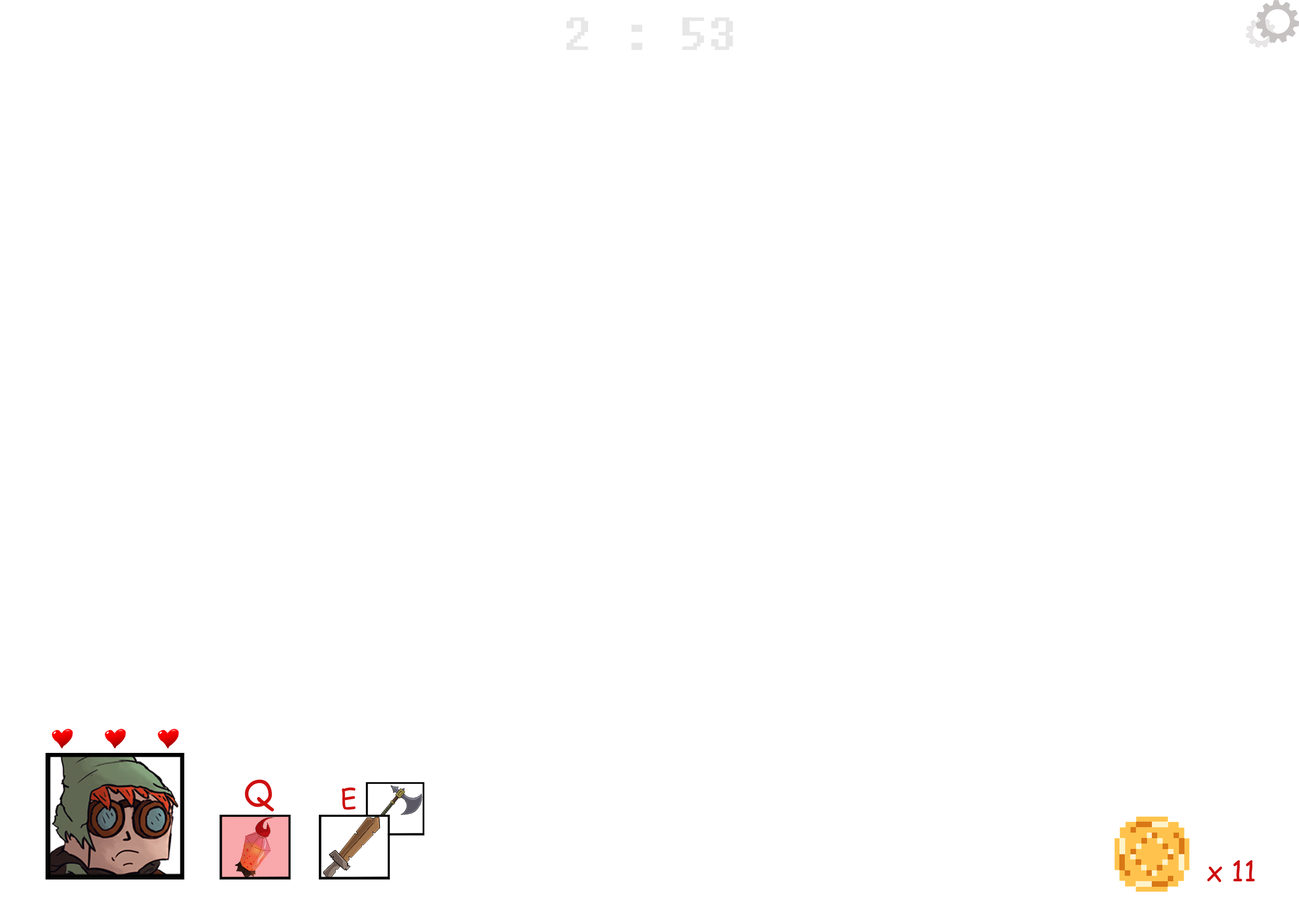
<style>
.page{position:relative;width:1299px;height:918px;background:#ffffff}
.page>*{position:absolute;margin:0}
.t1{font:46.3px "Fixedsys";color:#e7e7e7}
.t2{font:34.2px "ComicSansMS";color:#ce1010}
.t3{font:26.4px "ComicSansMS";color:#ce1010}
.t4{font:27.8px "ComicSansMS";color:#ce1010}
</style>
<div class="page">
<p class="t1" style="left:566px;top:17px;width:167px;height:33px">2 : 53</p>
<p class="t2" style="left:245px;top:780px;width:29px;height:32px;rotate:-4deg">Q</p>
<p class="t3" style="left:342px;top:787px;width:13px;height:23px;rotate:-4deg">E</p>
<p class="t4" style="left:1207px;top:860px;width:48px;height:22px">x 11</p>
</div>
